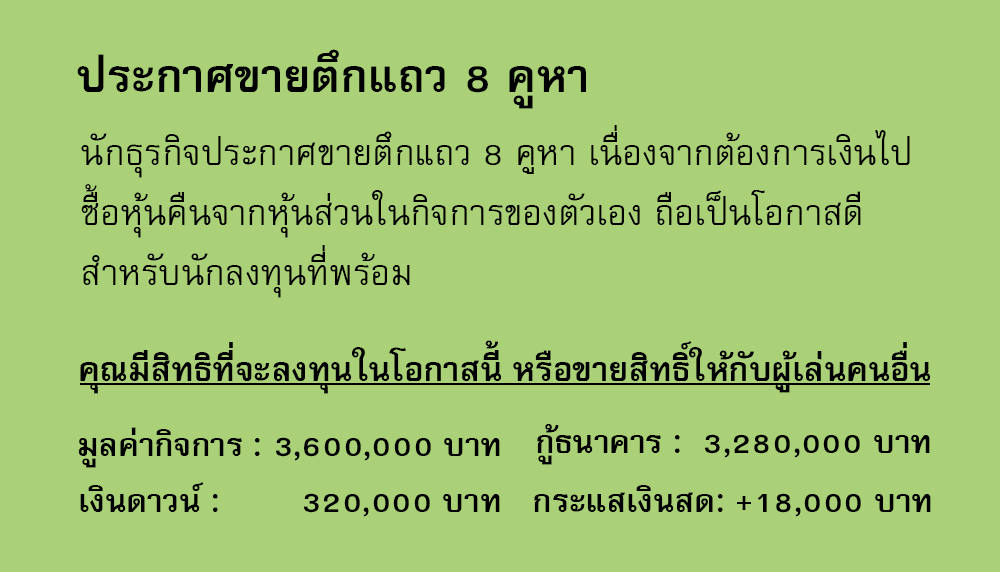
<style>
.page{position:relative;width:1000px;height:572px;background:#aad178}
.page>*{position:absolute;margin:0}
.t1{font:64px "FreesiaUPCBold";color:#000000}
.t2{font:50px/60px "FreesiaUPC";color:#000000}
.t3{font:47px "FreesiaUPCBold";color:#000000}
.t4{font:45px "FreesiaUPCBold";color:#000000}
</style>
<div class="page">
<p class="t1" style="left:77px;top:49px;width:509px;height:60px">ประกาศขายตึกแถว 8 คูหา</p>
<p class="t2" style="left:81px;top:125px;width:829px;height:173px">นักธุรกิจประกาศขายตึกแถว 8 คูหา เนื่องจากต้องการเงินไป<br>ซื้อหุ้นคืนจากหุ้นส่วนในกิจการของตัวเอง ถือเป็นโอกาสดี<br>สำหรับนักลงทุนที่พร้อม</p>
<p class="t3" style="left:80px;top:340px;width:851px;height:54px">คุณมีสิทธิที่จะลงทุนในโอกาสนี้ หรือขายสิทธิ์ให้กับผู้เล่นคนอื่น</p>
<p class="t4" style="left:537px;top:424px;width:393px;height:41px">กู้ธนาคาร :  3,280,000 บาท</p>
<p class="t4" style="left:78px;top:427px;width:422px;height:41px">มูลค่ากิจการ : 3,600,000 บาท</p>
<p class="t4" style="left:80px;top:481px;width:420px;height:36px">เงินดาวน์ :        320,000 บาท</p>
<p class="t4" style="left:534px;top:485px;width:397px;height:32px">กระแสเงินสด: +18,000 บาท</p>
</div>
